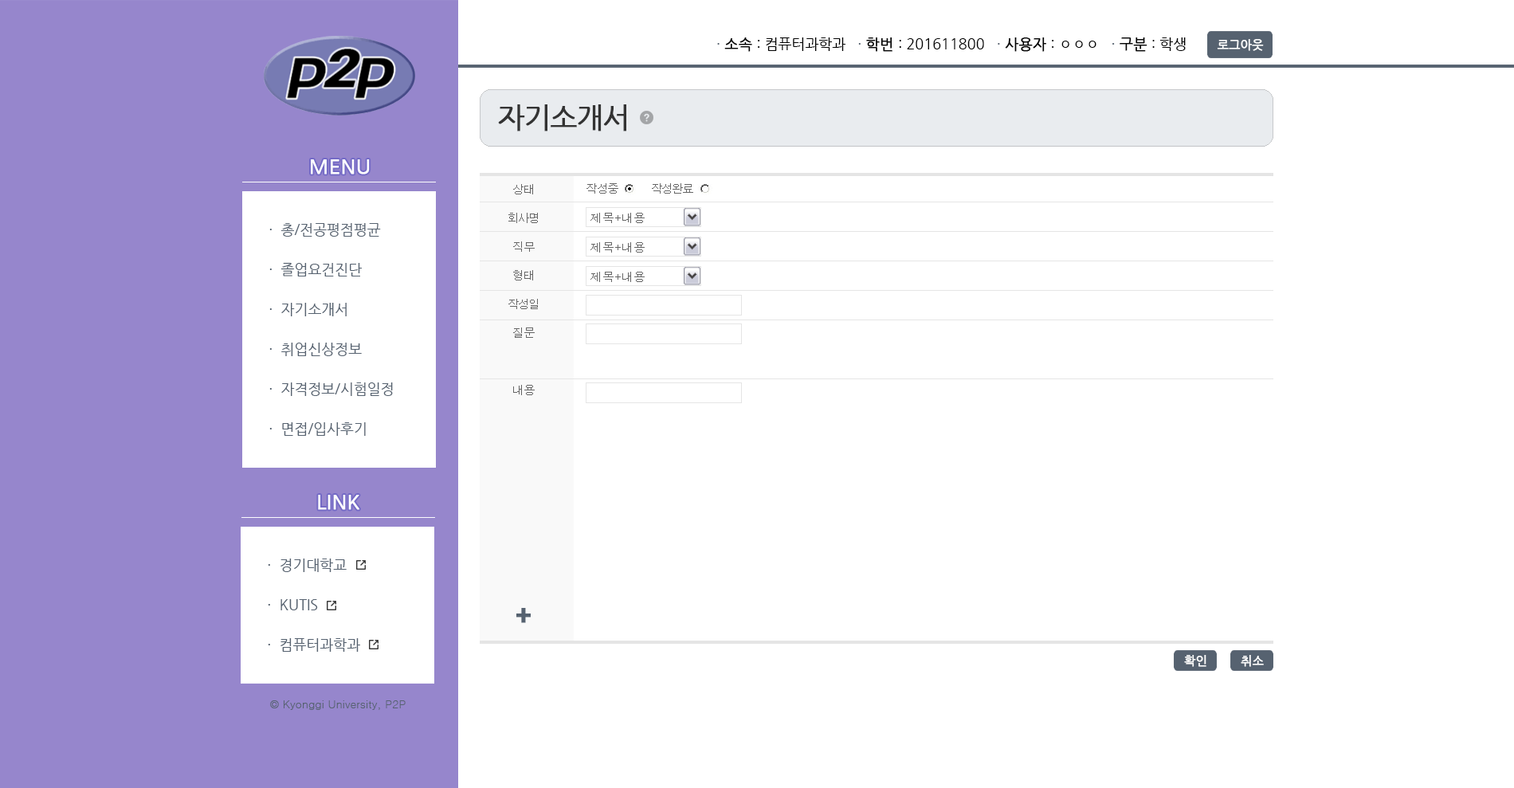
<style>
.page{position:relative;width:1514px;height:788px;background:#ffffff}
.page>*{position:absolute;margin:0}
.t1{font:14.3px "NanumGothic";color:#000000}
.t2{font:14.3px "NanumGothic";color:#566270}
.t3{font:14.3px "NanumGothic";color:#000000;font-weight:bold}
.t4{font:11.9px "NanumGothic";color:#ffffff;font-weight:bold}
.t5{font:28.7px "NanumGothic";letter-spacing:-0.05em;color:#333333;font-weight:bold}
.t6{font:19.9px "NanumGothic";color:#ffffff;font-weight:bold}
.t7{font:11.2px/28.7px "Dotum";letter-spacing:-0.05em;color:#666666}
.t8{font:11.2px "Dotum";letter-spacing:-0.05em;color:#666666}
.t9{font:14.3px/39.8px "NanumGothic";color:#566270}
.t10{font:11.2px "Dotum";color:#566270}
</style>
<div class="page">
<p class="t1" style="left:717px;top:37px;width:468px;height:15px"><span class="t2">· </span><span class="t3">소속</span> : 컴퓨터과학과   <span class="t2">· </span><span class="t3">학번 </span>: 201611800   <span class="t2">· </span><span class="t3">사용자</span> : ㅇㅇㅇ   <span class="t2">· </span><span class="t3">구분</span> : 학생</p>
<p class="t4" style="left:1216px;top:39px;width:47px;height:12px">로그아웃</p>
<p class="t5" style="left:498px;top:104px;width:128px;height:27px">자기소개서</p>
<p class="t6" style="left:311px;top:159px;width:59px;height:15px">MENU</p>
<p class="t7" style="left:508px;top:184px;width:30px;height:211px;text-align:center">상태<br>회사명<br>직무<br>형태<br>작성일<br>질문<br><br>내용</p>
<p class="t8" style="left:586px;top:183px;width:32px;height:11px">작성중</p>
<p class="t8" style="left:652px;top:183px;width:41px;height:11px">작성완료</p>
<p class="t9" style="left:269px;top:223px;width:124px;height:213px">·  총/전공평점평균<br>·  졸업요건진단<br>·  자기소개서<br>·  취업신상정보<br>·  자격정보/시험일정<br>·  면접/입사후기</p>
<p class="t6" style="left:318px;top:495px;width:41px;height:15px">LINK</p>
<p class="t9" style="left:268px;top:558px;width:92px;height:94px">·  경기대학교<br>·  KUTIS<br>·  컴퓨터과학과</p>
<p class="t10" style="left:270px;top:700px;width:135px;height:10px">© Kyonggi University, P2P</p>
</div>
